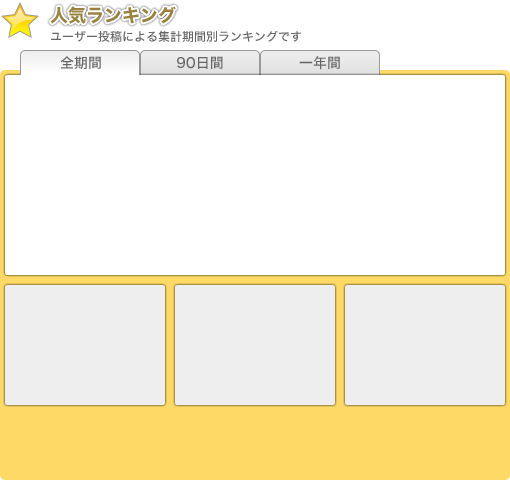
<style>
.page{position:relative;width:510px;height:480px;background:#ffffff}
.page>*{position:absolute;margin:0}
.t1{font:18px "HiraginoKaku-W7-90msp-RKSJ-H";color:#99823d}
.t2{font:12px "HiraginoKaku-W5-90msp-RKSJ-H";color:#666666}
.t3{font:14px "HiraginoKaku-W5-90msp-RKSJ-H";color:#666666}
</style>
<div class="page">
<p class="t1" style="left:50px;top:6px;width:126px;height:18px">人気ランキング</p>
<p class="t2" style="left:51px;top:30px;width:251px;height:12px">ユーザー投稿による集計期間別ランキングです</p>
<p class="t3" style="left:60px;top:56px;width:41px;height:13px">全期間</p>
<p class="t3" style="left:177px;top:56px;width:46px;height:13px">90日間</p>
<p class="t3" style="left:299px;top:56px;width:41px;height:14px">一年間</p>
</div>
